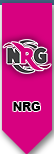
<style>
.page{position:relative;width:54px;height:154px;background:#d70180}
.page>*{position:absolute;margin:0}
.t1{font:11.7px "Arial-Black";letter-spacing:-0.01em;color:#000000}
</style>
<div class="page">
<p class="t1" style="left:13px;top:102px;width:27px;height:9px">NRG</p>
</div>
